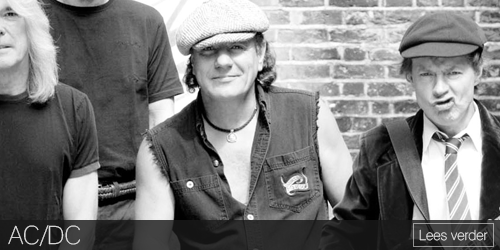
<style>
.page{position:relative;width:500px;height:250px}
.page>*{position:absolute;margin:0}
.t1{font:25px "Lane-Narrow";color:#dedede}
.t2{font:14px "Lane-Narrow";color:#dedede}
</style>
<div class="page">
<p class="t1" style="left:8px;top:225px;width:72px;height:22px">AC/DC</p>
<p class="t2" style="left:419px;top:229px;width:69px;height:12px">Lees verder</p>
</div>
